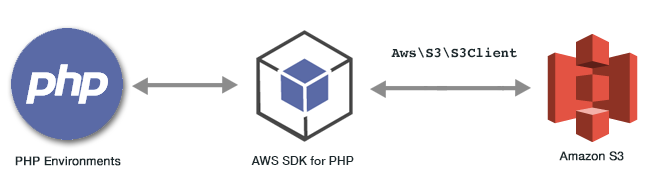
<style>
.page{position:relative;width:650px;height:190px;background:#ffffff}
.page>*{position:absolute;margin:0}
.t1{font:14px "Courier-Bold";color:#1d2a2e}
.t2{font:12px "HelveticaNeue";color:#1d2a2e;font-weight:bold}
.t3{font:12.1px "HelveticaNeue-Medium";color:#1d2a2e}
</style>
<div class="page">
<p class="t1" style="left:391px;top:47px;width:126px;height:11px">Aws\S3\S3Client</p>
<p class="t2" style="left:15px;top:156px;width:106px;height:10px">PHP Environments</p>
<p class="t3" style="left:251px;top:156px;width:103px;height:9px">AWS SDK for PHP</p>
<p class="t2" style="left:559px;top:151px;width:65px;height:10px">Amazon S3</p>
</div>
